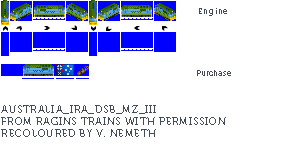
<style>
.page{position:relative;width:300px;height:159px;background:#ffffff}
.page>*{position:absolute;margin:0}
.t1{font:8px "Museo700-Regular";letter-spacing:0.075em;color:#444c5c}
.t2{font:8px "Museo700-Regular";color:#444c5c}
.t3{font:10px "Museo700-Regular";letter-spacing:0.075em;color:#444c5c;text-transform:uppercase}
</style>
<div class="page">
<p class="t1" style="left:199px;top:8px;width:28px;height:8px">Engine</p>
<p class="t2" style="left:197px;top:70px;width:34px;height:6px">Purchase</p>
<p class="t3" style="left:1px;top:105px;width:225px;height:32px">Australia_IRA_DSB_MZ_III<br>from ragins trains with permission<br>RECOLOURED BY v. nemeth</p>
</div>
